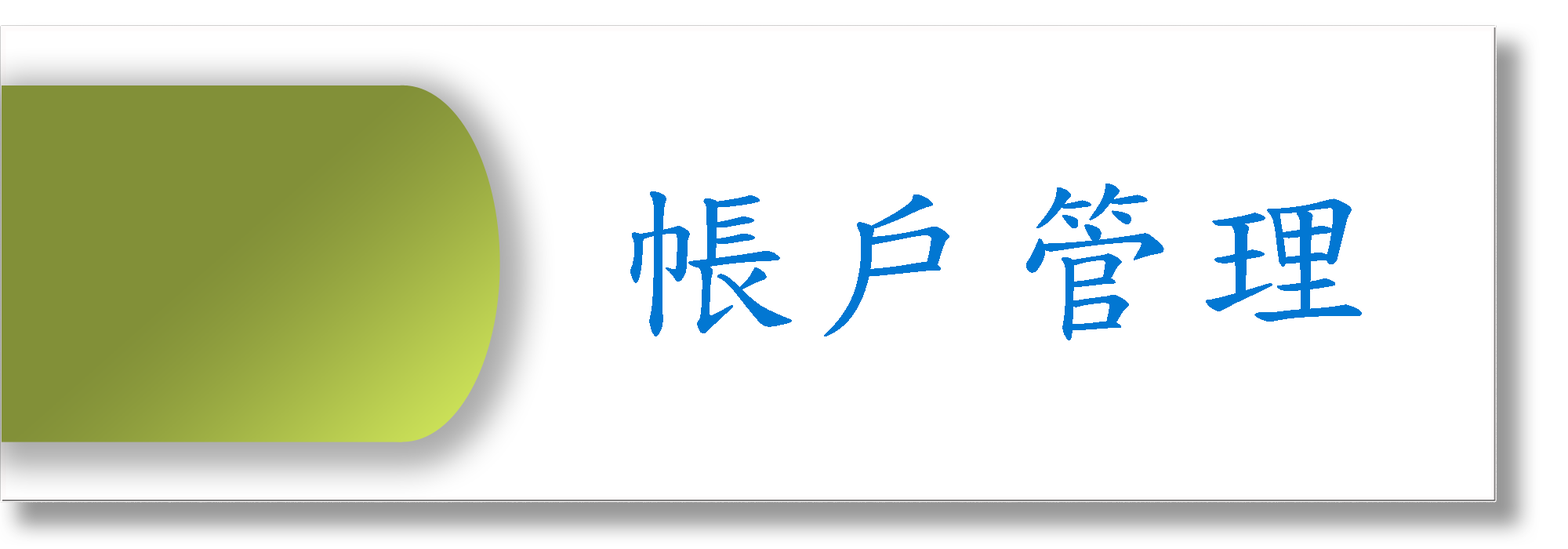
<style>
.page{position:relative;width:1568px;height:549px;background:#ffffff}
.page>*{position:absolute;margin:0}
.t1{font:175px "DFKaiShu-SB-Estd-BF";letter-spacing:0.08em;color:#0277d2}
</style>
<div class="page">
<p class="t1" style="left:630px;top:183px;width:732px;height:157px">帳戶管理</p>
</div>
